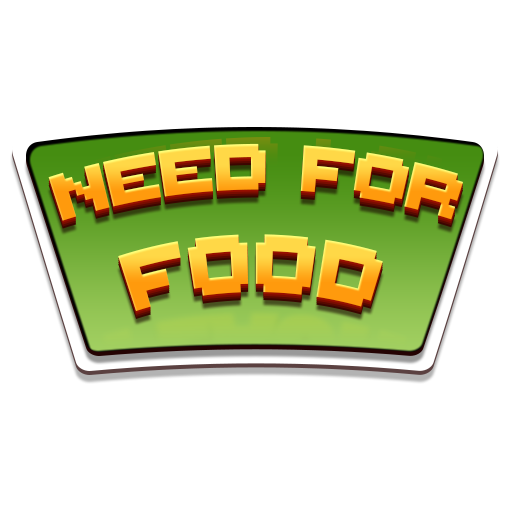
<style>
.page{position:relative;width:512px;height:512px;background:#ffffff}
.page>*{position:absolute;margin:0}
.t1{font:104.2px "ThaleahFat";letter-spacing:-0.025em;text-transform:uppercase}
.t2{font:131.7px "ThaleahFat";text-transform:uppercase;scale:0.83 1}
</style>
<div class="page">
<p class="t1" style="left:48px;top:143px;width:415px;height:78px">NEED FOR</p>
<p class="t2" style="left:118px;top:234px;width:265px;height:77px">FOOD</p>
</div>
